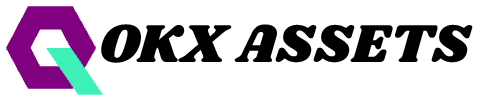
<style>
.page{position:relative;width:500px;height:100px;background:#ffffff}
.page>*{position:absolute;margin:0}
.t1{font:55.3px "Shrikhand-Regular";color:#000000;text-transform:uppercase}
</style>
<div class="page">
<p class="t1" style="left:101px;top:24px;width:372px;height:39px">okx Assets</p>
</div>
